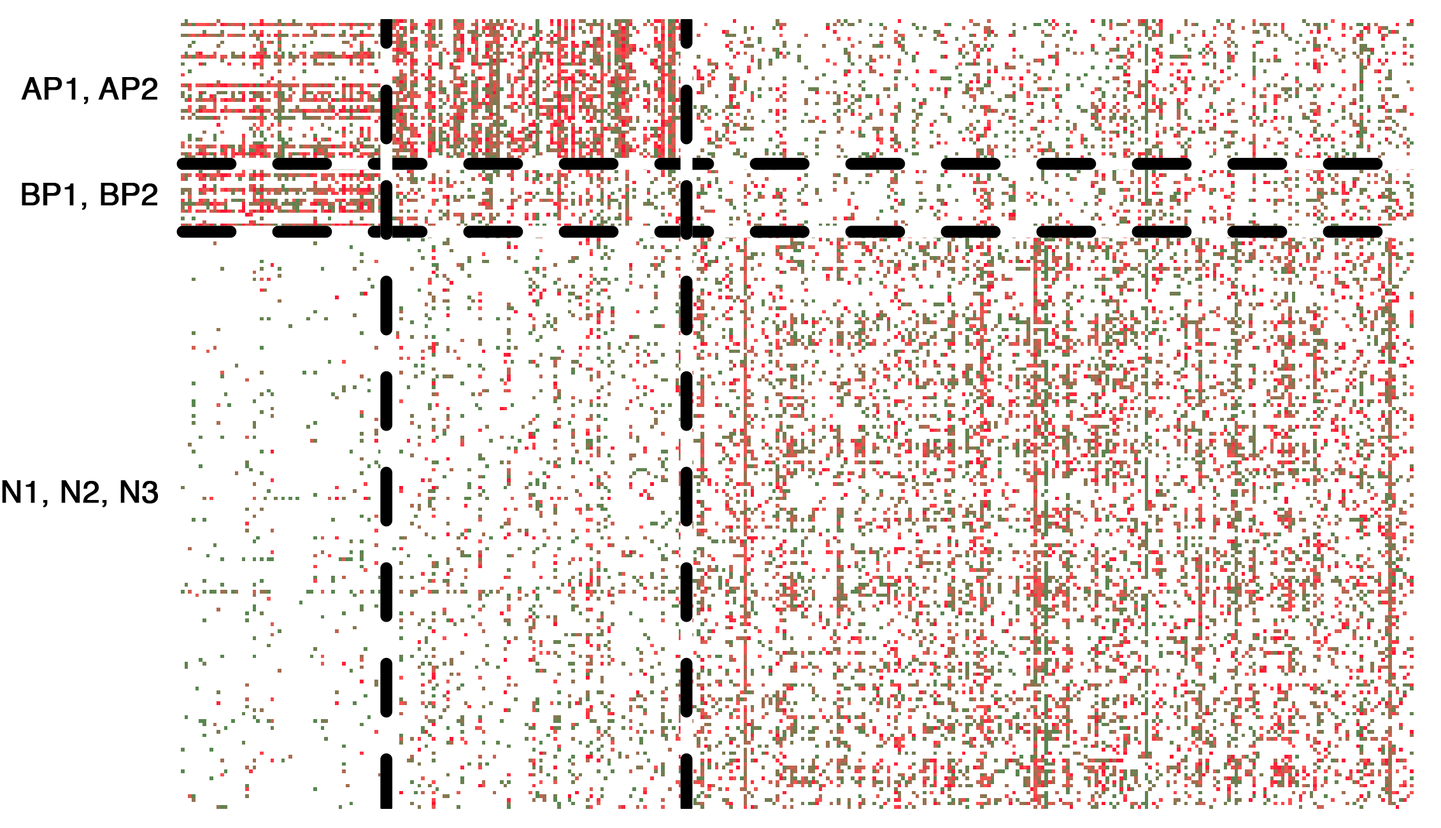
<style>
.page{position:relative;width:1441px;height:828px;background:#ffffff}
.page>*{position:absolute;margin:0}
.t1{font:30.6px "Helvetica";color:#000000;font-weight:bold}
</style>
<div class="page">
<p class="t1" style="left:21px;top:77px;width:137px;height:27px">AP1, AP2</p>
<p class="t1" style="left:22px;top:183px;width:136px;height:27px">BP1, BP2</p>
<p class="t1" style="left:2px;top:480px;width:157px;height:27px">N1, N2, N3</p>
</div>
